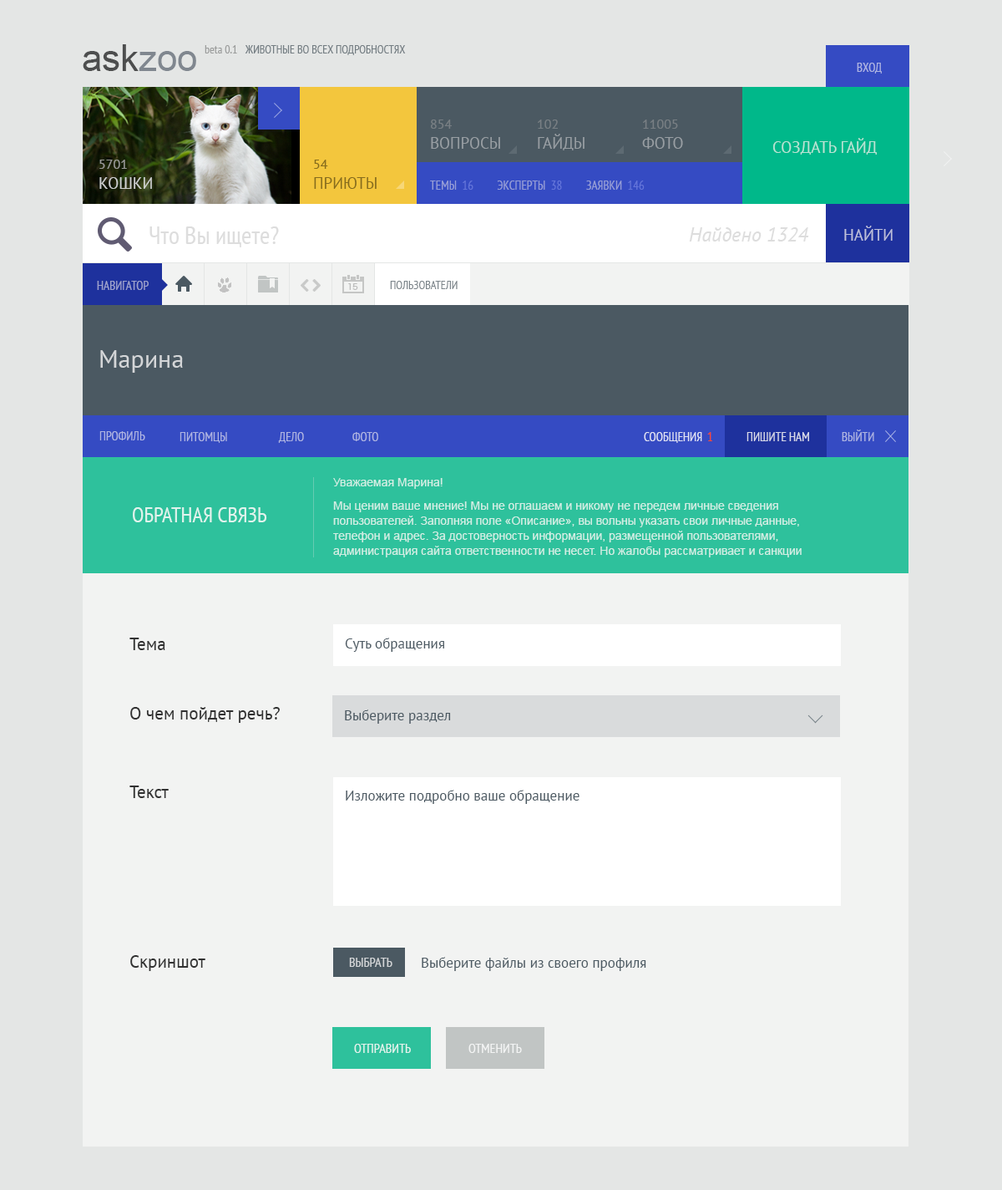
<style>
.page{position:relative;width:1002px;height:1190px;background:#f2f3f2}
.page>*{position:absolute;margin:0}
.t1{font:12.5px "PTSans-Narrow";color:#aeb4e2;text-transform:uppercase}
.t2{font:12.5px "PTSans-Narrow";color:#9ea3cd;text-transform:uppercase}
.t3{font:11.7px "PTSans-Narrow";color:#7b848a;text-transform:uppercase}
.t4{font:25.1px "PTSans-Regular";color:#d4d6d8}
.t5{font:12.5px "PTSans-Narrow";color:#e1e3f4;text-transform:uppercase}
.t6{font:12.5px "PTSans-Narrow";color:#fd482e;text-transform:uppercase}
.t7{font:12.5px "PTSans-Narrow";color:#d8daea;text-transform:uppercase}
.t8{font:11.7px/15px "ArialMT";color:#d0eee4}
.t9{font:21.7px "PTSans-Narrow";color:#e0f3ed;text-transform:uppercase}
.t10{font:17.5px "PTSans-Regular";color:#313131}
.t11{font:14.2px "PTSans-Regular";color:#4b5962}
.t12{font:13.4px "PTSans-Narrow";color:#d4d6d8;text-transform:uppercase}
.t13{font:13.4px "PTSans-Narrow";color:#e0f3ed;text-transform:uppercase}
.t14{font:13.4px "PTSans-Narrow";color:#ffffff;text-transform:uppercase}
</style>
<div class="page">
<p class="t1" style="left:857px;top:63px;width:25px;height:11px">вход</p>
<p class="t2" style="left:97px;top:281px;width:52px;height:9px">навигатор</p>
<p class="t3" style="left:390px;top:281px;width:68px;height:8px">пользователи</p>
<p class="t4" style="left:100px;top:350px;width:83px;height:23px">Марина</p>
<p class="t1" style="left:99px;top:431px;width:46px;height:9px">профиль</p>
<p class="t1" style="left:180px;top:432px;width:47px;height:11px">питомцы</p>
<p class="t1" style="left:278px;top:432px;width:26px;height:11px">дело</p>
<p class="t1" style="left:353px;top:432px;width:25px;height:9px">фото</p>
<p class="t5" style="left:644px;top:432px;width:59px;height:11px">сообщения</p>
<p class="t6" style="left:708px;top:432px;width:5px;height:9px">1</p>
<p class="t7" style="left:747px;top:432px;width:62px;height:9px">пишите нам</p>
<p class="t1" style="left:842px;top:429px;width:33px;height:12px">выйти</p>
<p class="t8" style="left:333px;top:478px;width:469px;height:79px">Уважаемая Марина!<br><br>Мы ценим ваше мнение! Мы не оглашаем и никому не передем личные сведения пользователей. Заполняя поле «Описание», вы вольны указать свои личные данные, телефон и адрес. За достоверность информации, размещенной пользователями, администрация сайта ответственности не несет. Но жалобы рассматривает и санкции принимает.</p>
<p class="t9" style="left:133px;top:507px;width:134px;height:15px">обратная связь</p>
<p class="t10" style="left:129px;top:637px;width:36px;height:13px">Тема</p>
<p class="t11" style="left:345px;top:637px;width:99px;height:15px">Суть обращения</p>
<p class="t10" style="left:130px;top:707px;width:150px;height:16px">О чем пойдет речь?</p>
<p class="t11" style="left:345px;top:709px;width:106px;height:14px">Выберите раздел</p>
<p class="t10" style="left:129px;top:785px;width:40px;height:13px">Текст</p>
<p class="t11" style="left:346px;top:789px;width:234px;height:15px">Изложите подробно ваше обращение</p>
<p class="t10" style="left:130px;top:955px;width:75px;height:16px">Скриншот</p>
<p class="t12" style="left:349px;top:957px;width:44px;height:10px">Выбрать</p>
<p class="t11" style="left:422px;top:956px;width:225px;height:15px">Выберите файлы из своего профиля</p>
<p class="t13" style="left:354px;top:1043px;width:57px;height:10px">отправить</p>
<p class="t14" style="left:469px;top:1043px;width:53px;height:10px;opacity:0.8">отменить</p>
</div>
